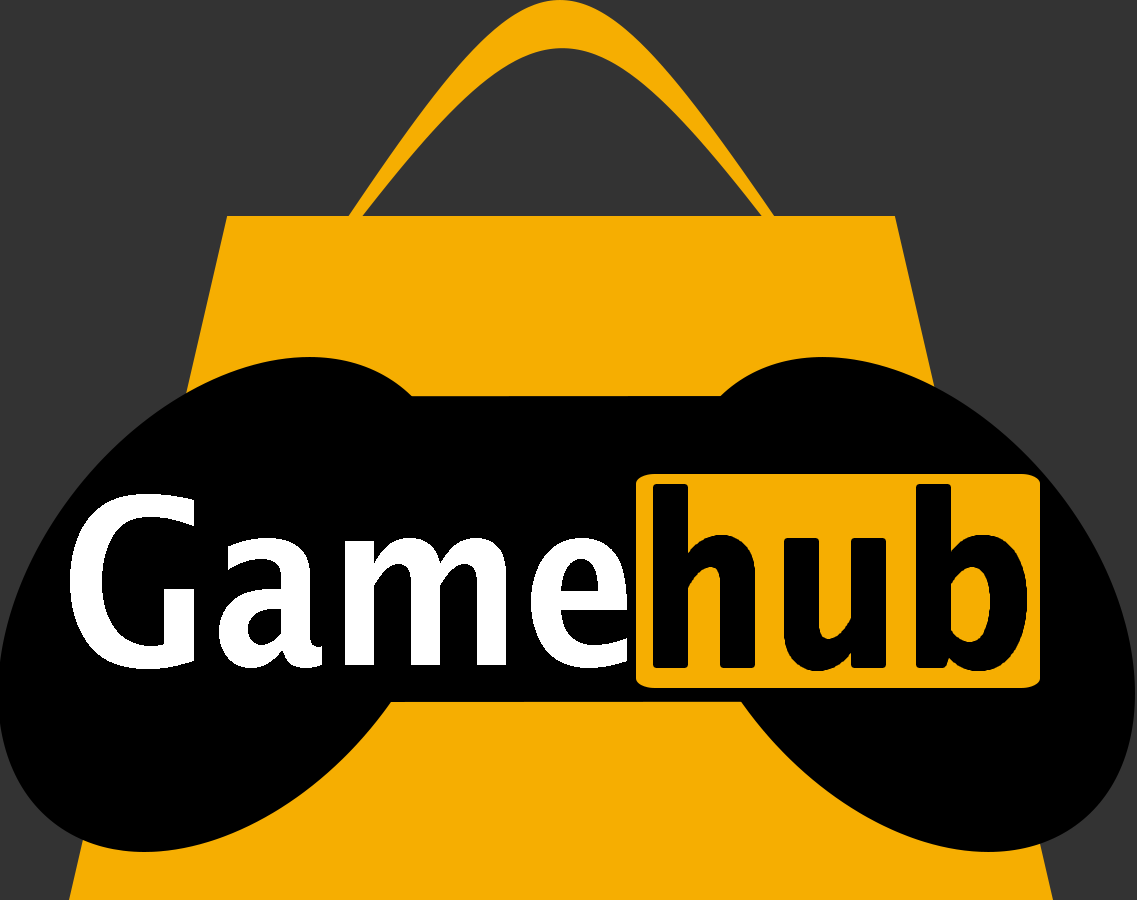
<style>
.page{position:relative;width:1137px;height:900px;background:#333333}
.page>*{position:absolute;margin:0}
.t1{font:231.4px "LucidaSans-Demi";color:#ffffff;scale:0.86 1}
.t2{font:231.4px "LucidaSans-Demi";color:#000000;scale:0.86 1}
</style>
<div class="page">
<p class="t1" style="left:70px;top:487px;width:954px;height:182px">Game<span class="t2">hub</span></p>
</div>
